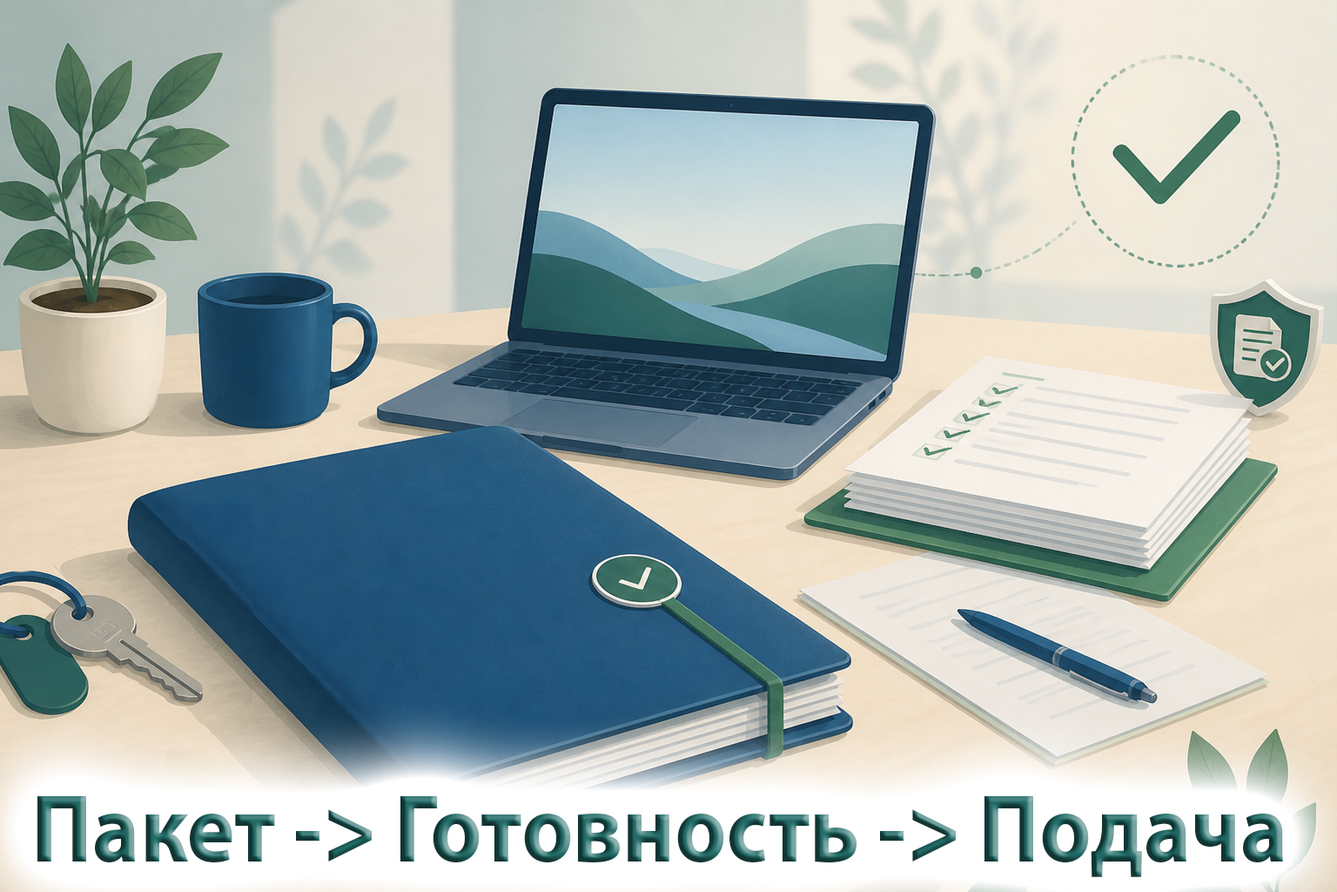
<style>
.page{position:relative;width:1337px;height:892px}
.page>*{position:absolute;margin:0}
.t1{font:97.5px "MyriadPro-Bold";scale:0.92 1}
</style>
<div class="page">
<p class="t1" style="left:37px;top:796px;width:1246px;height:81px">Пакет -&gt; Готовность -&gt; Подача</p>
</div>
